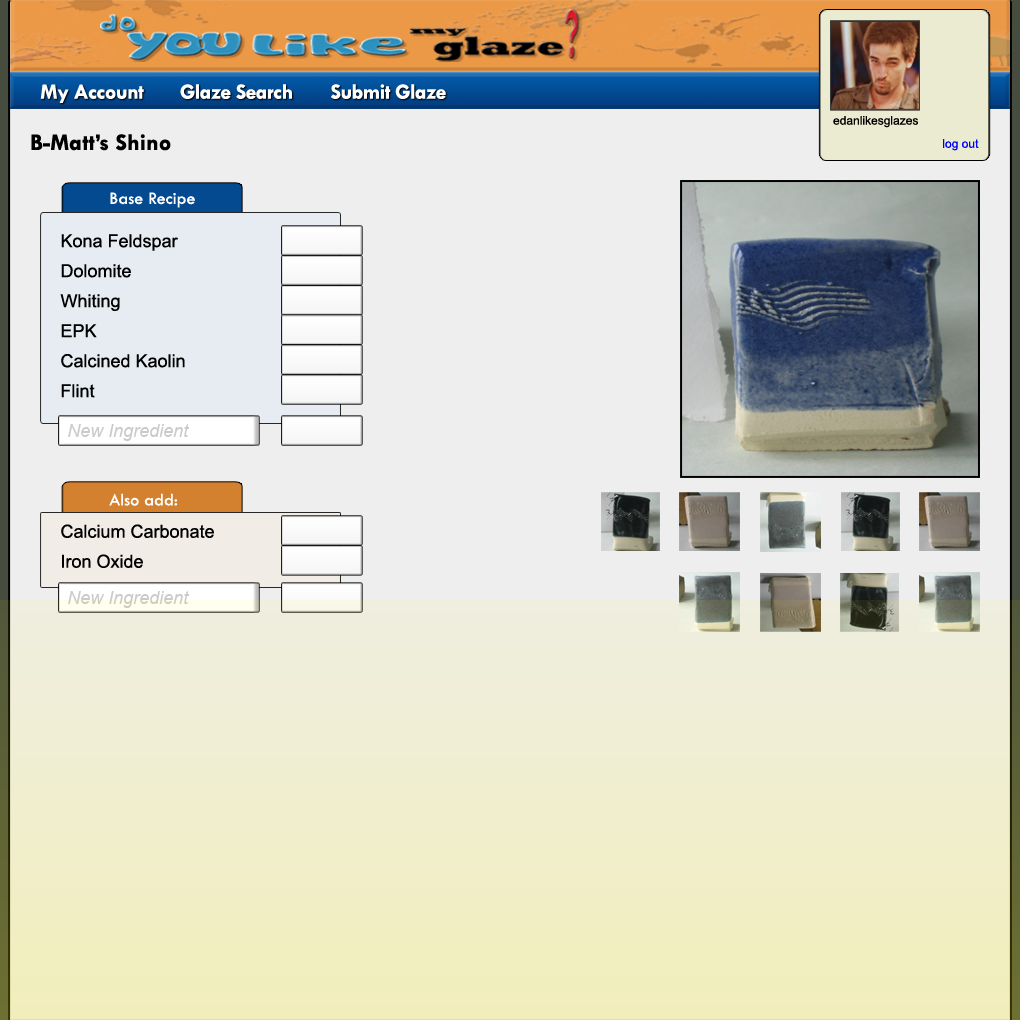
<style>
.page{position:relative;width:1020px;height:1020px;background:#eeeeee}
.page>*{position:absolute;margin:0}
.t1{font:22px "TwCenMT-Bold";letter-spacing:-0.025em;color:#ffffff}
.t2{font:12px "ArialMT";color:#000000}
.t3{font:24px "TwCenMT-Bold";color:#000000}
.t4{font:12px "ArialMT";color:#0000ff}
.t5{font:18px "TwCenMT-Regular";color:#ffffff}
.t6{font:18px/30px "ArialMT";color:#000000}
.t7{font:18px "Arial-ItalicMT";color:#cacaca}
</style>
<div class="page">
<p class="t1" style="left:40px;top:84px;width:104px;height:19px">My Account</p>
<p class="t1" style="left:180px;top:84px;width:112px;height:15px">Glaze Search</p>
<p class="t1" style="left:331px;top:84px;width:115px;height:15px">Submit Glaze</p>
<p class="t2" style="left:833px;top:116px;width:85px;height:12px">edanlikesglazes</p>
<p class="t3" style="left:31px;top:134px;width:140px;height:17px">B-Matt’s Shino</p>
<p class="t4" style="left:943px;top:139px;width:36px;height:12px">log out</p>
<p class="t5" style="left:110px;top:192px;width:85px;height:16px">Base Recipe</p>
<p class="t6" style="left:60px;top:234px;width:125px;height:164px">Kona Feldspar<br>Dolomite<br>Whiting<br>EPK<br>Calcined Kaolin<br>Flint</p>
<p class="t7" style="left:68px;top:424px;width:122px;height:17px">New Ingredient</p>
<p class="t5" style="left:109px;top:493px;width:69px;height:13px">Also add:</p>
<p class="t6" style="left:61px;top:524px;width:153px;height:44px">Calcium Carbonate<br>Iron Oxide</p>
<p class="t7" style="left:68px;top:591px;width:122px;height:17px">New Ingredient</p>
</div>
